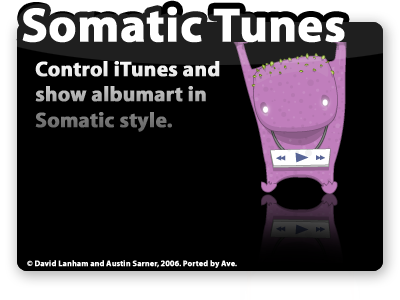
<style>
.page{position:relative;width:400px;height:300px;background:#000000}
.page>*{position:absolute;margin:0}
.t1{font:48px "MyriadBold";color:#ffffff;font-weight:bold}
.t2{font:21px "MyriadBold";font-weight:bold}
.t3{font:8px "MyriadBold";font-weight:bold}
.t4{font:8px "MyriadBold";color:#ffffff;font-weight:bold}
</style>
<div class="page">
<p class="t1" style="left:22px;top:6px;width:323px;height:37px">Somatic Tunes</p>
<p class="t2" style="left:35px;top:61px;width:185px;height:71px">Control iTunes and show albumart in Somatic style.</p>
<p class="t3" style="left:27px;top:260px;width:160px;height:7px">© Andreas Verhoeven &amp; Javier Ocasio 2005</p>
<p class="t4" style="left:27px;top:260px;width:210px;height:8px">© David Lanham and Austin Sarner, 2006. Ported by Ave.</p>
</div>
